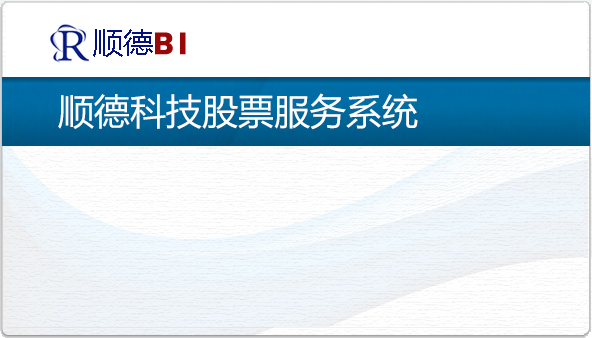
<style>
.page{position:relative;width:592px;height:338px;background:#ffffff}
.page>*{position:absolute;margin:0}
.t1{font:36px "MicrosoftYaHei";color:#ffffff}
</style>
<div class="page">
<p class="t1" style="left:58px;top:93px;width:360px;height:37px">顺德科技股票服务系统</p>
</div>
